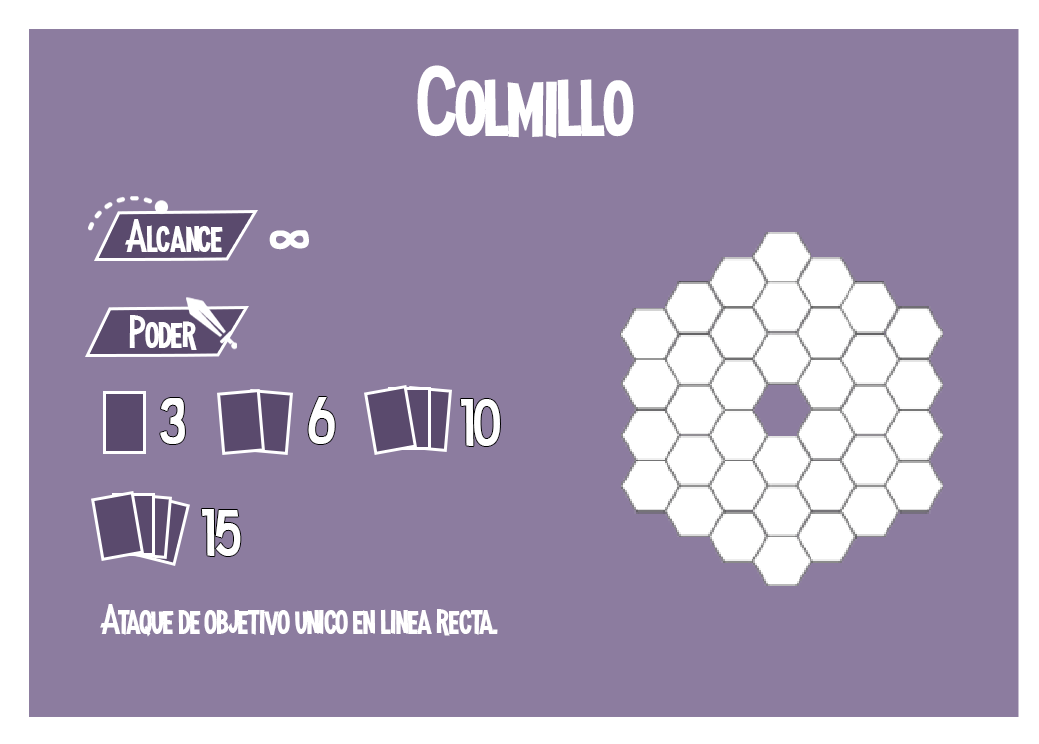
<style>
.page{position:relative;width:1039px;height:744px;background:#8c7c9f}
.page>*{position:absolute;margin:0}
.t1{font:100px "MadnessHyperactive";color:#ffffff}
.t2{font:45.8px "MadnessHyperactive";color:#ffffff}
.t3{font:55.8px "MadnessHyperactive";color:#ffffff}
.t4{font:66.3px "MadnessHyperactive";color:#ffffff}
.t5{font:41.7px "MadnessHyperactive";color:#ffffff}
</style>
<div class="page">
<p class="t1" style="left:417px;top:65px;width:217px;height:73px">Colm illo</p>
<p class="t2" style="left:125px;top:219px;width:98px;height:33px">Alcance</p>
<p class="t3" style="left:269px;top:230px;width:40px;height:20px;rotate:90deg">8</p>
<p class="t2" style="left:129px;top:315px;width:68px;height:35px">Poder</p>
<p class="t4" style="left:160px;top:398px;width:25px;height:46px">3</p>
<p class="t4" style="left:308px;top:397px;width:27px;height:47px">6</p>
<p class="t4" style="left:460px;top:399px;width:40px;height:48px">10</p>
<p class="t4" style="left:201px;top:509px;width:40px;height:48px">15</p>
<p class="t5" style="left:100px;top:604px;width:398px;height:33px">Ataque de objetivo unico en linea recta.</p>
</div>
